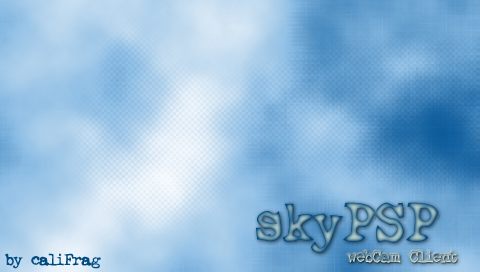
<style>
.page{position:relative;width:480px;height:272px}
.page>*{position:absolute;margin:0}
.t1{font:60px "Ghostwriter"}
.t2{font:18px "Ghostwriter";color:#004a80}
.t3{font:18px "Ghostwriter"}
</style>
<div class="page">
<p class="t1" style="left:256px;top:202px;width:184px;height:51px">skyPSP</p>
<p class="t2" style="left:4px;top:253px;width:97px;height:16px">by caliFrag</p>
<p class="t3" style="left:347px;top:250px;width:110px;height:13px">webCam Client</p>
</div>
